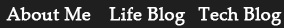
<style>
.page{position:relative;width:284px;height:28px;background:#1f1f1f}
.page>*{position:absolute;margin:0}
.t1{font:18px "PalatinoLinotype-Roman";color:#ffffff;font-weight:bold}
</style>
<div class="page">
<p class="t1" style="left:6px;top:7px;width:85px;height:14px">About Me</p>
<p class="t1" style="left:109px;top:7px;width:77px;height:19px">Life Blog</p>
<p class="t1" style="left:198px;top:7px;width:84px;height:19px">Tech Blog</p>
</div>
